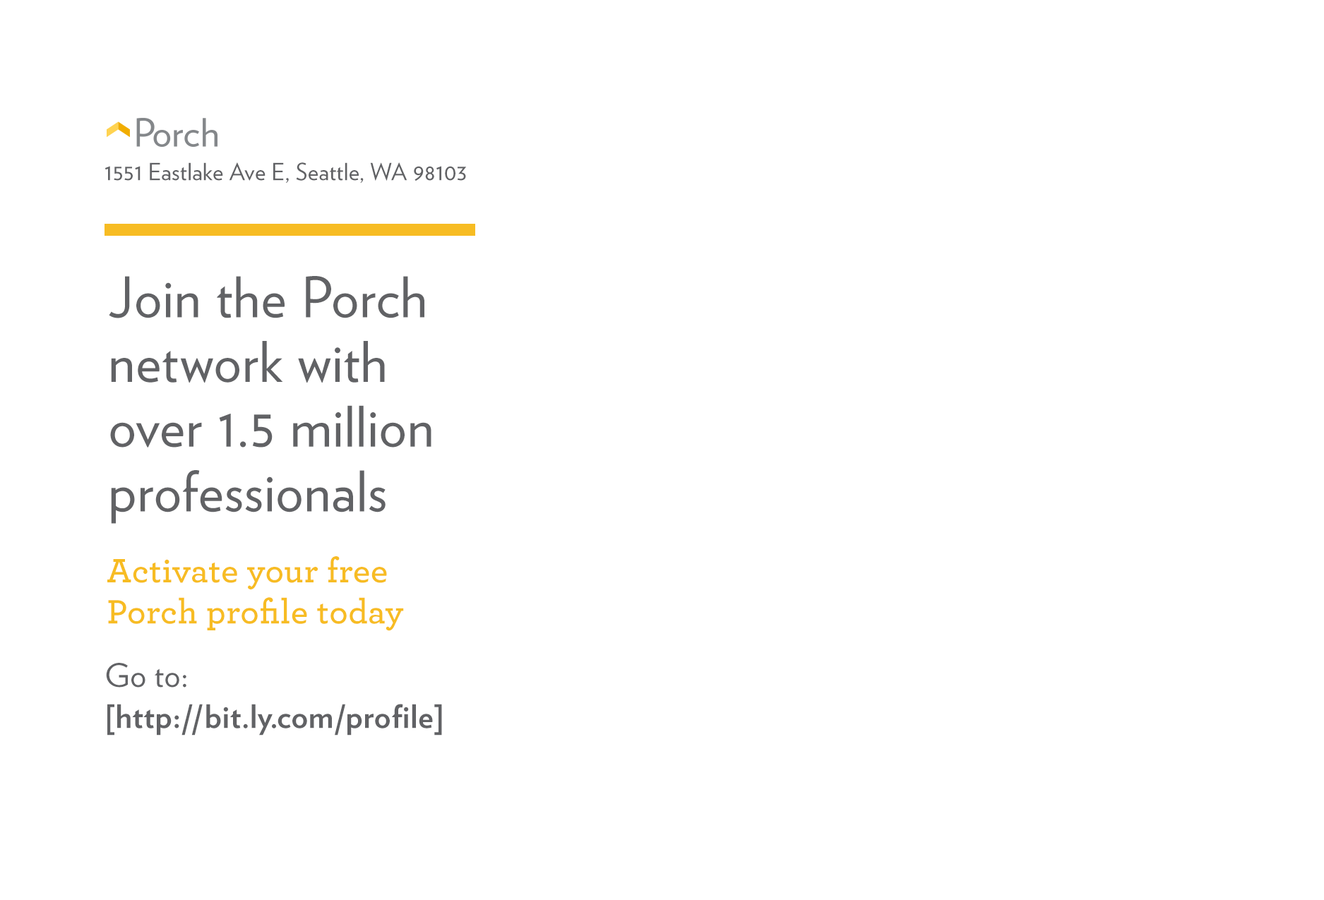
<style>
.page{position:relative;width:1324px;height:900px;background:#ffffff}
.page>*{position:absolute;margin:0}
.t1{font:23.5px "Verlag-Book";letter-spacing:0.01em;color:#616265}
.t2{font:55.9px/64.7px "Verlag-Book";letter-spacing:0.022em;color:#616265}
.t3{font:35.3px/41.2px "Archer-Semibold";letter-spacing:0.01em;color:#f7bc23}
.t4{font:32.4px/41.2px "Verlag-Bold";letter-spacing:0.01em;color:#616265}
.t5{font:32.4px/41.2px "Verlag-Book";letter-spacing:0.01em;color:#616265}
</style>
<div class="page">
<p class="t1" style="left:105px;top:162px;width:361px;height:22px">1551 Eastlake Ave E, Seattle, WA 98103</p>
<p class="t2" style="left:109px;top:276px;width:323px;height:248px">Join the Porch network with<br>over 1.5 million professionals</p>
<p class="t3" style="left:107px;top:557px;width:297px;height:74px">Activate your free<br>Porch profile today</p>
<p class="t4" style="left:106px;top:663px;width:336px;height:73px"><span class="t5">Go to:<br></span>[http://bit.ly.com/profile]</p>
</div>
